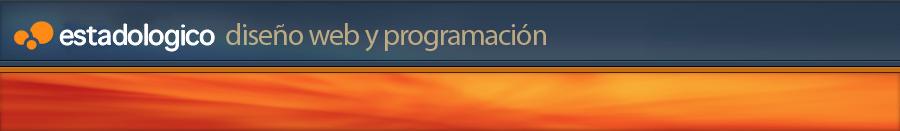
<style>
.page{position:relative;width:900px;height:131px}
.page>*{position:absolute;margin:0}
.t1{font:38px "AppleSymbols";letter-spacing:-0.02em;color:#ffffff}
.t2{font:30px "MyriadPro-Regular";letter-spacing:-0.035em;color:#bcab84}
</style>
<div class="page">
<p class="t1" style="left:60px;top:24px;width:155px;height:27px">estadologico</p>
<p class="t2" style="left:226px;top:23px;width:320px;height:29px">diseño web y programación</p>
</div>
